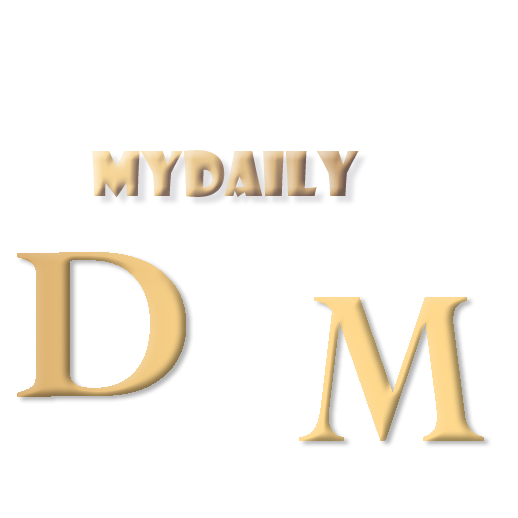
<style>
.page{position:relative;width:518px;height:518px;background:#ffffff}
.page>*{position:absolute;margin:0}
.t1{font:60px "ShowcardGothic-Reg"}
.t2{font:245.6px "Perpetua-Bold";scale:1.06 1}
.t3{font:245.6px "Perpetua-Bold";color:#fed88d;scale:0.87 1}
</style>
<div class="page">
<p class="t1" style="left:92px;top:150px;width:267px;height:48px">Mydaily</p>
<p class="t2" style="left:17px;top:252px;width:169px;height:145px;rotate:-1deg">D</p>
<p class="t3" style="left:299px;top:297px;width:185px;height:144px">M</p>
</div>
